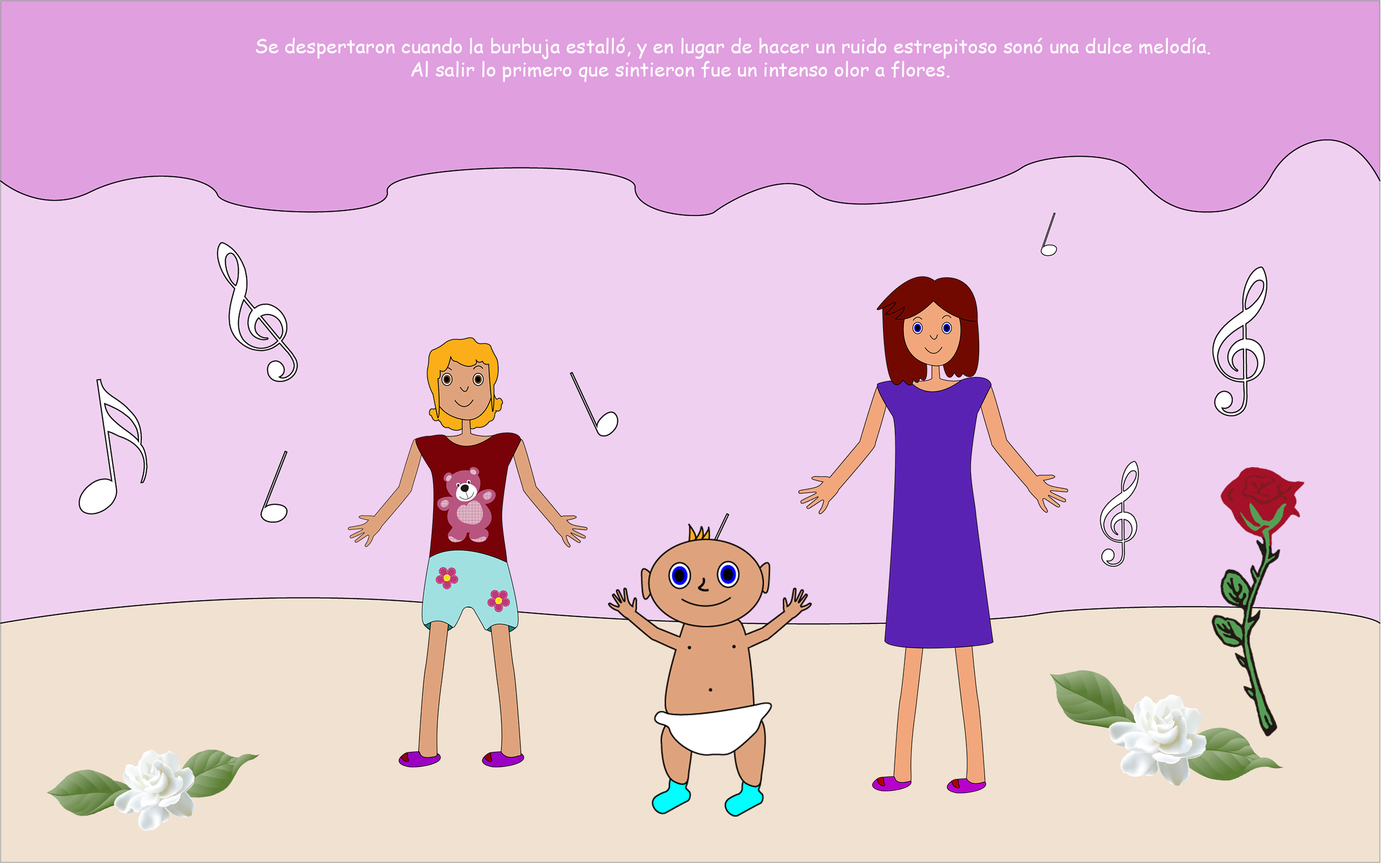
<style>
.page{position:relative;width:1381px;height:863px;background:#efd0f0}
.page>*{position:absolute;margin:0}
.t1{font:19.4px "ComicSansMS";color:#ffffff}
</style>
<div class="page">
<p class="t1" style="left:256px;top:38px;width:954px;height:44px">Se despertaron cuando la burbuja estalló, y en lugar de hacer un ruido estrepitoso sonó una dulce melodía. <br>        Al salir lo primero que sintieron fue un intenso olor a flores.</p>
</div>
